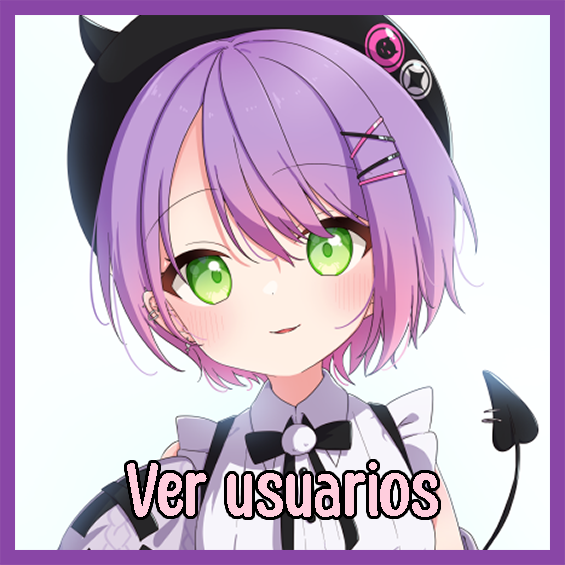
<style>
.page{position:relative;width:565px;height:565px}
.page>*{position:absolute;margin:0}
.t1{font:85.1px "HoneyNotes-Regular";color:#ffcddd}
</style>
<div class="page">
<p class="t1" style="left:127px;top:462px;width:311px;height:55px">Ver usuarios</p>
</div>
